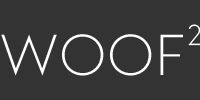
<style>
.page{position:relative;width:200px;height:100px;background:#333333}
.page>*{position:absolute;margin:0}
.t1{font:26.2px "WSansNew-Light";letter-spacing:0.05em;color:#ffffff}
.t2{font:52.3px "WSansNew-Light";letter-spacing:0.05em;color:#ffffff}
</style>
<div class="page">
<p class="t1" style="left:188px;top:24px;width:13px;height:22px">2</p>
<p class="t2" style="left:1px;top:34px;width:182px;height:42px">WOOF</p>
</div>
